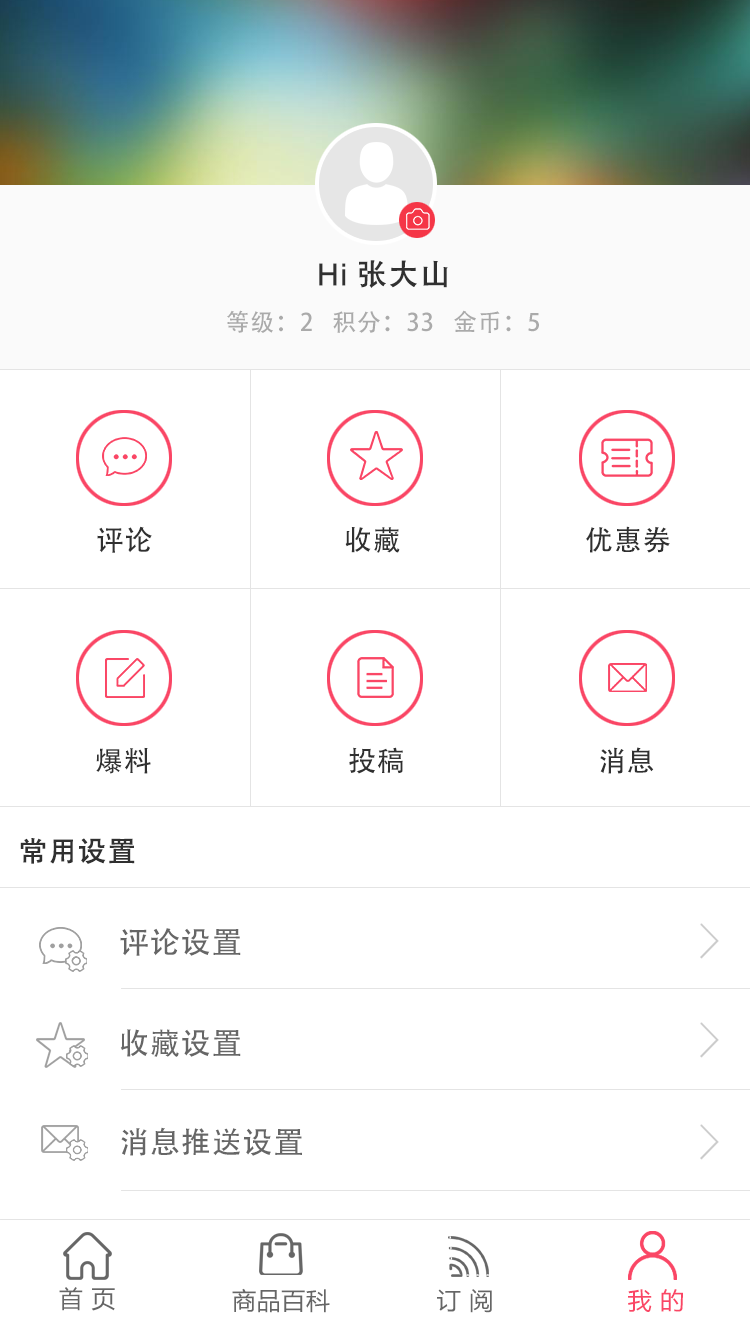
<style>
.page{position:relative;width:750px;height:1320px;background:#ffffff}
.page>*{position:absolute;margin:0}
.t1{font:30px "AdobeHeitiStd-Regular";letter-spacing:0.03em;color:#303030;font-weight:bold}
.t2{font:30px "ArialMT";letter-spacing:0.03em;color:#303030;font-weight:bold}
.t3{font:24px "AdobeHeitiStd-Regular";letter-spacing:0.03em;color:#aaaaaa}
.t4{font:28px "AdobeHeitiStd-Regular";letter-spacing:0.03em;color:#303030}
.t5{font:28px "AdobeHeitiStd-Regular";letter-spacing:0.03em;color:#303030;font-weight:bold}
.t6{font:30px "AdobeHeitiStd-Regular";letter-spacing:0.03em;color:#666666}
.t7{font:24px "MicrosoftYaHei";letter-spacing:0.03em;color:#666666}
.t8{font:24px "MicrosoftYaHei";letter-spacing:0.03em;color:#fa4665}
</style>
<div class="page">
<p class="t1" style="left:319px;top:260px;width:129px;height:28px"><span class="t2">Hi </span>张大山</p>
<p class="t3" style="left:227px;top:310px;width:312px;height:23px">等级：2   积分：33   金币：5</p>
<p class="t4" style="left:97px;top:526px;width:55px;height:27px">评论</p>
<p class="t4" style="left:345px;top:527px;width:55px;height:26px">收藏</p>
<p class="t4" style="left:586px;top:526px;width:84px;height:27px">优惠券</p>
<p class="t4" style="left:96px;top:747px;width:55px;height:27px">爆料</p>
<p class="t4" style="left:349px;top:747px;width:54px;height:27px">投稿</p>
<p class="t4" style="left:600px;top:747px;width:54px;height:27px">消息</p>
<p class="t5" style="left:20px;top:838px;width:115px;height:26px">常用设置</p>
<p class="t6" style="left:120px;top:928px;width:121px;height:28px">评论设置</p>
<p class="t6" style="left:120px;top:1029px;width:121px;height:28px">收藏设置</p>
<p class="t6" style="left:121px;top:1127px;width:181px;height:29px">消息推送设置</p>
<p class="t7" style="left:59px;top:1287px;width:56px;height:24px">首 页</p>
<p class="t7" style="left:232px;top:1288px;width:98px;height:25px">商品百科</p>
<p class="t7" style="left:437px;top:1289px;width:55px;height:24px">订 阅</p>
<p class="t8" style="left:628px;top:1289px;width:55px;height:23px">我 的</p>
</div>
